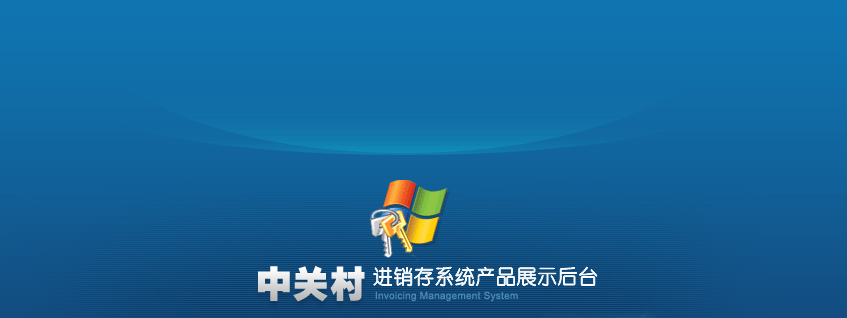
<style>
.page{position:relative;width:847px;height:318px}
.page>*{position:absolute;margin:0}
.t1{font:36px "By-JOSSQ-DMF-in-BeiJing";letter-spacing:0.025em}
.t2{font:20px "YouYuan";letter-spacing:0.025em;color:#ffffff}
.t3{font:10px "ArialMT";letter-spacing:0.025em;color:#4c8ab3}
</style>
<div class="page">
<p class="t1" style="left:258px;top:266px;width:107px;height:36px">中关村</p>
<p class="t2" style="left:373px;top:267px;width:224px;height:19px">进销存系统产品展示后台</p>
<p class="t3" style="left:375px;top:291px;width:143px;height:11px">Invoicing Management System</p>
</div>
